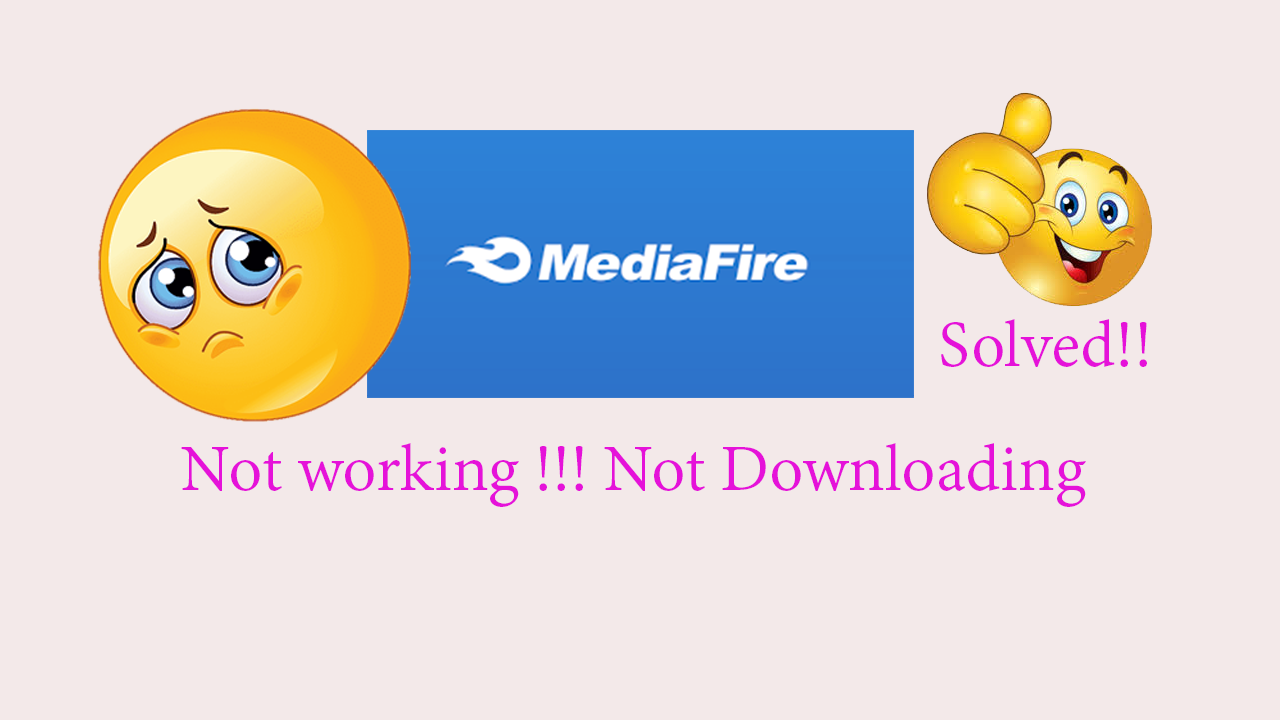
<style>
.page{position:relative;width:1280px;height:720px;background:#f3e9e9}
.page>*{position:absolute;margin:0}
.t1{font:72px "AdobeDevanagari-Regular";color:#e512d9}
</style>
<div class="page">
<p class="t1" style="left:941px;top:319px;width:206px;height:48px">Solved!!</p>
<p class="t1" style="left:181px;top:443px;width:905px;height:64px">Not working !!! Not Downloading</p>
</div>
